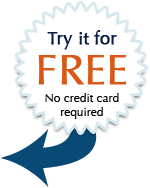
<style>
.page{position:relative;width:150px;height:188px;background:#ffffff}
.page>*{position:absolute;margin:0}
.t1{font:18px "Optima-Regular";color:#081c45;font-weight:bold}
.t2{font:42px "Optima-Regular";color:#d95717;text-transform:uppercase;font-weight:bold}
.t3{font:12px "Optima-Regular";color:#000000}
</style>
<div class="page">
<p class="t1" style="left:47px;top:30px;width:70px;height:20px">Try it for</p>
<p class="t2" style="left:38px;top:55px;width:89px;height:30px">Free</p>
<p class="t3" style="left:45px;top:93px;width:74px;height:26px;text-align:center">No credit card<br>required</p>
</div>
